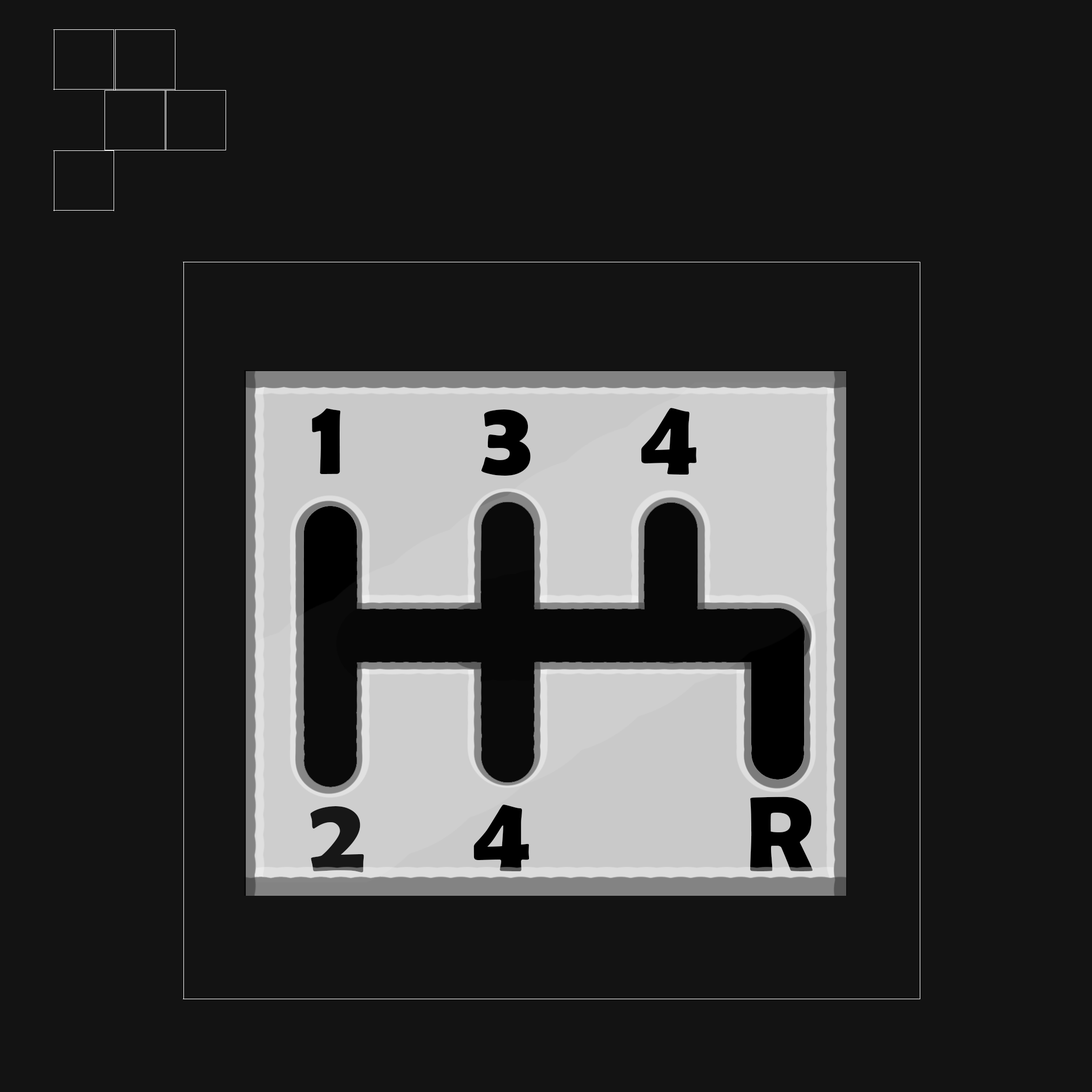
<style>
.page{position:relative;width:1092px;height:1092px;background:#131313}
.page>*{position:absolute;margin:0}
.t1{font:107.2px "BerlinSansFBDemi-Bold";color:#000000}
</style>
<div class="page">
<p class="t1" style="left:312px;top:408px;width:385px;height:68px">1     3    4</p>
<p class="t1" style="left:310px;top:797px;width:503px;height:75px">2    4        R</p>
</div>
